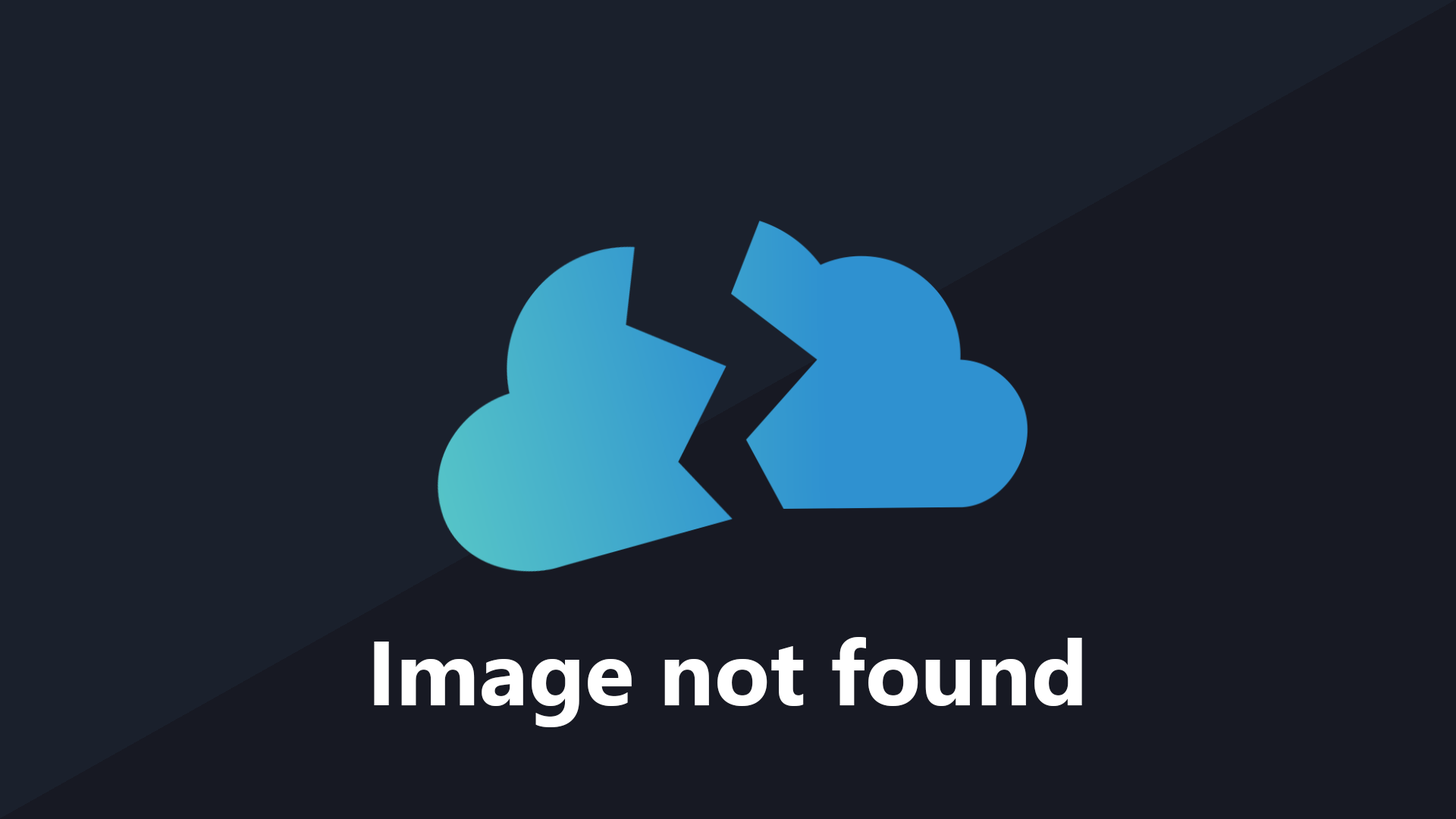
<style>
.page{position:relative;width:1456px;height:819px;background:#1a202c}
.page>*{position:absolute;margin:0}
.t1{font:91px "SegoeUI-Bold";color:#ffffff}
</style>
<div class="page">
<p class="t1" style="left:374px;top:637px;width:708px;height:90px">Image not found</p>
</div>
